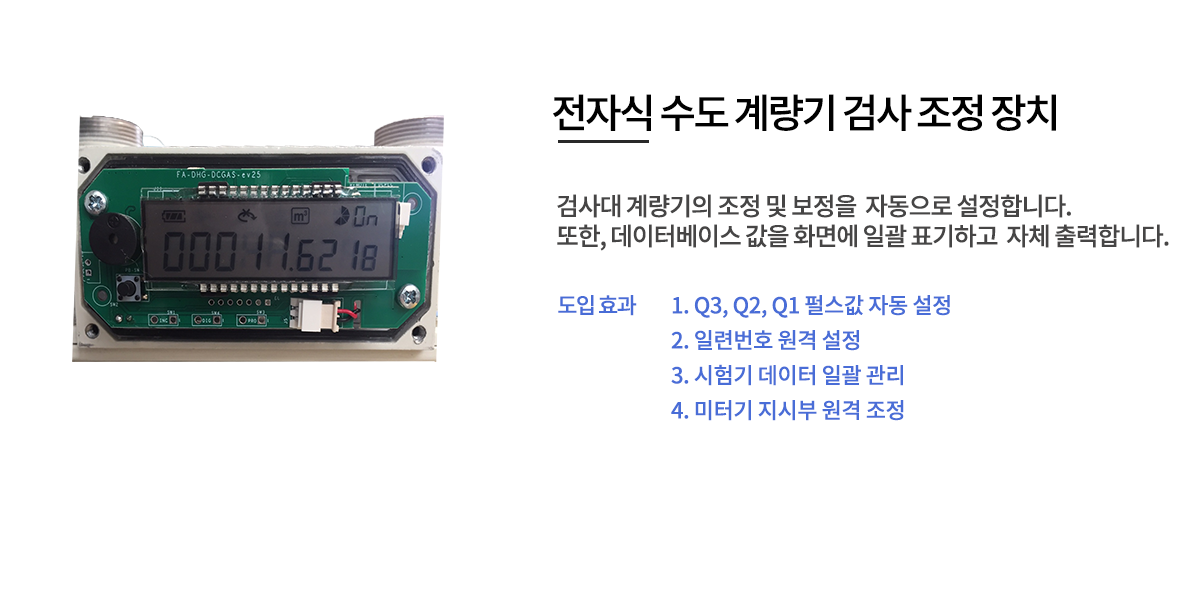
<style>
.page{position:relative;width:1200px;height:600px;background:#ffffff}
.page>*{position:absolute;margin:0}
.t1{font:40px "NotoSansCJKkr-Medium";letter-spacing:-0.07em;color:#010101}
.t2{font:25px/30px "NotoSansCJKkr-Medium";letter-spacing:-0.05em;color:#464545}
.t3{font:22px "NotoSansCJKkr-Medium";letter-spacing:-0.07em;color:#486cd6}
.t4{font:22px/35px "NotoSansCJKkr-Medium";letter-spacing:-0.02em;color:#496dd7}
</style>
<div class="page">
<p class="t1" style="left:553px;top:94px;width:503px;height:37px">전자식 수도 계량기 검사 조정 장치</p>
<p class="t2" style="left:557px;top:194px;width:612px;height:57px">검사대 계량기의 조정 및 보정을  자동으로 설정합니다. <br>또한, 데이터베이스 값을 화면에 일괄 표기하고  자체 출력합니다.</p>
<p class="t3" style="left:558px;top:295px;width:79px;height:21px">도입 효과</p>
<p class="t4" style="left:671px;top:295px;width:279px;height:126px">1. Q3, Q2, Q1 펄스값 자동 설정<br>2. 일련번호 원격 설정<br>3. 시험기 데이터 일괄 관리<br>4. 미터기 지시부 원격 조정</p>
</div>
